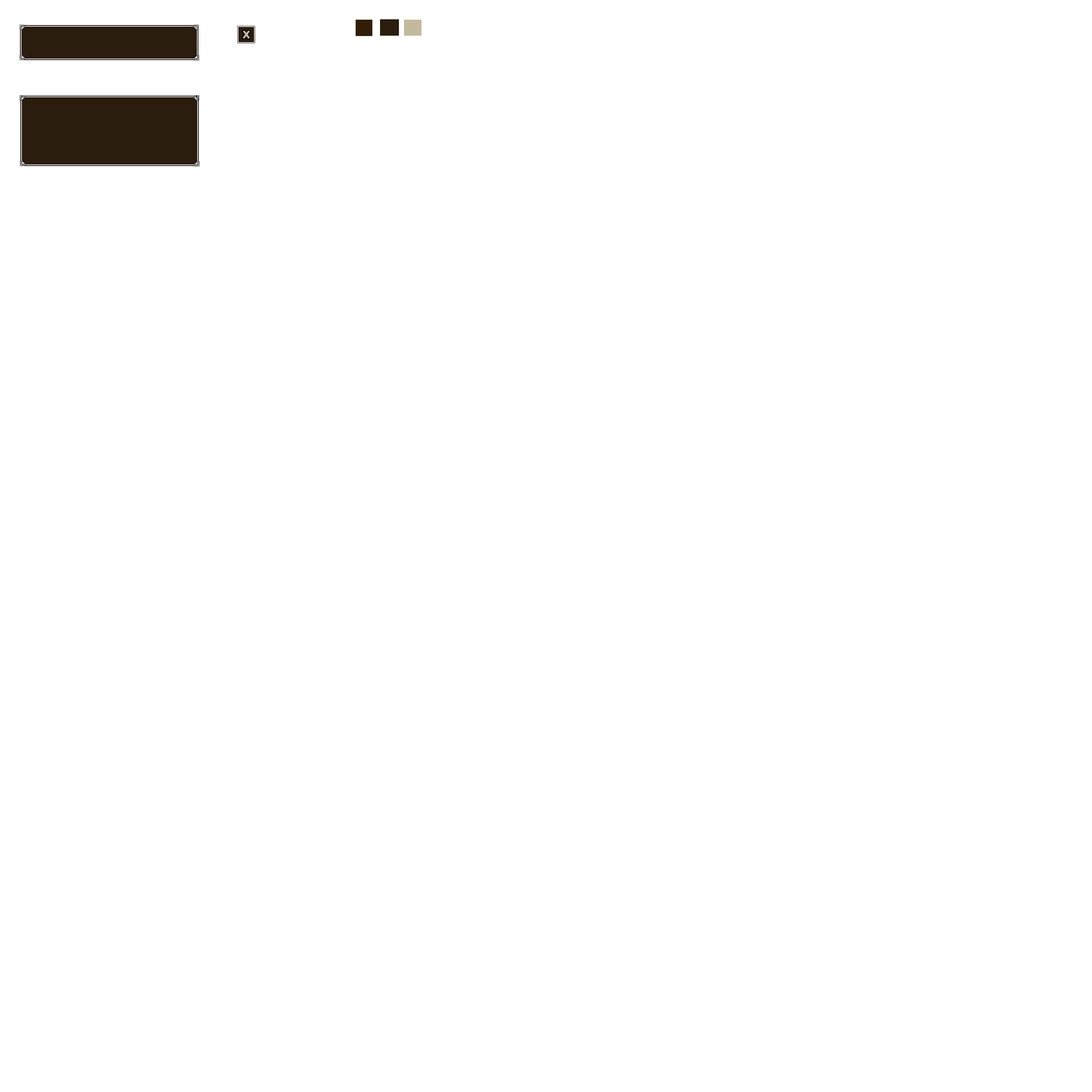
<style>
.page{position:relative;width:1092px;height:1092px;background:#ffffff}
.page>*{position:absolute;margin:0}
.t1{font:12px "DejaVuSans";color:#c3b99c}
</style>
<div class="page">
<p class="t1" style="left:243px;top:31px;width:7px;height:7px">x</p>
</div>
